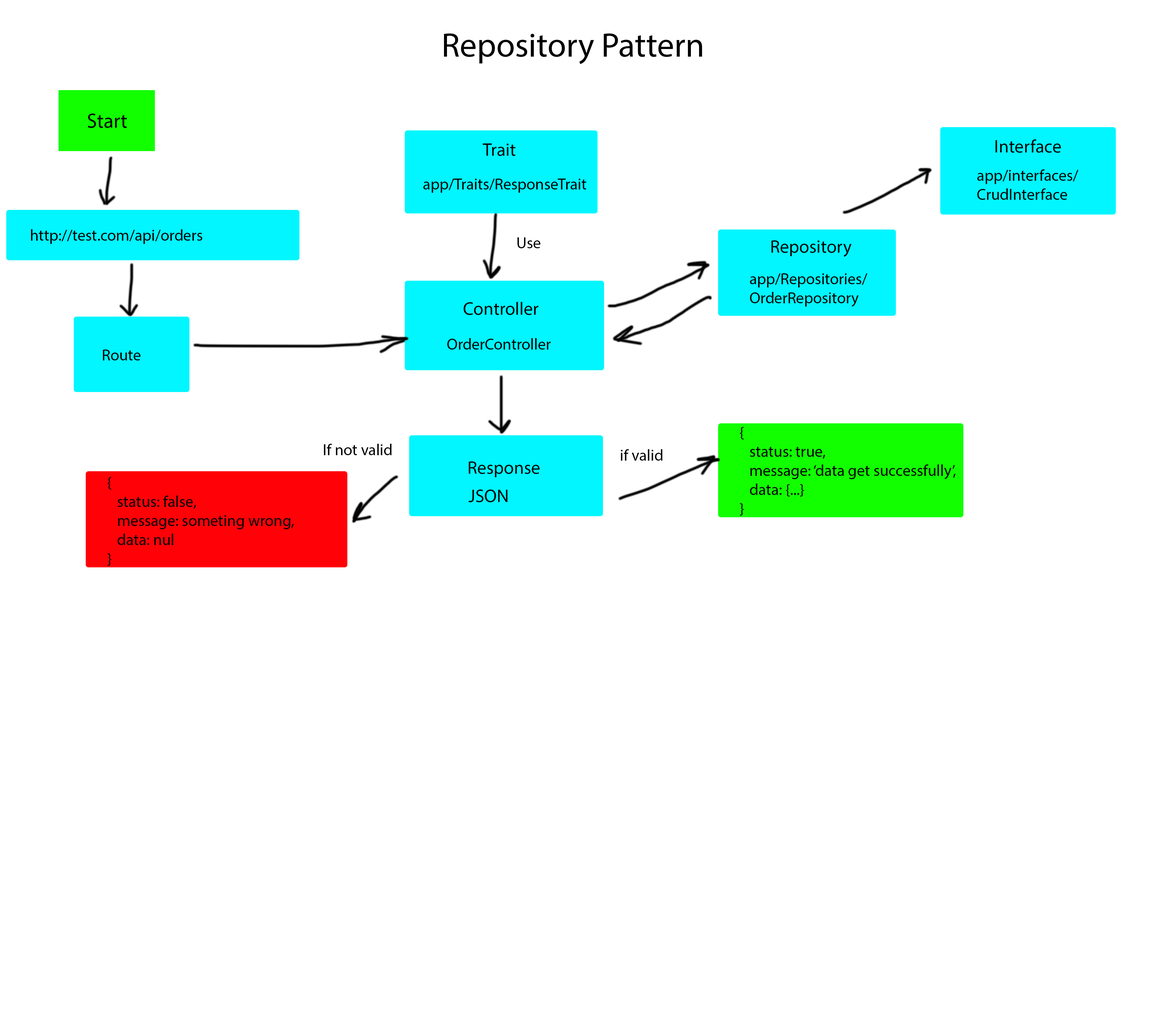
<style>
.page{position:relative;width:1170px;height:1019px;background:#ffffff}
.page>*{position:absolute;margin:0}
.t1{font:34px "MyriadPro-Regular";color:#000000}
.t2{font:20.4px "MyriadPro-Regular";color:#000000}
.t3{font:18.2px "MyriadPro-Regular";color:#000000}
.t4{font:15.9px "MyriadPro-Regular";color:#000000}
</style>
<div class="page">
<p class="t1" style="left:444px;top:33px;width:258px;height:31px">Repository Pattern</p>
<p class="t2" style="left:88px;top:114px;width:39px;height:14px">Start</p>
<p class="t3" style="left:483px;top:143px;width:33px;height:13px">Trait</p>
<p class="t3" style="left:996px;top:139px;width:65px;height:14px">Interface</p>
<p class="t4" style="left:977px;top:169px;width:102px;height:31px">app/interfaces/<br>CrudInterface</p>
<p class="t4" style="left:423px;top:179px;width:163px;height:14px">app/Traits/ResponseTrait</p>
<p class="t4" style="left:31px;top:229px;width:171px;height:15px">http://test.com/api/orders</p>
<p class="t4" style="left:518px;top:237px;width:22px;height:11px">Use</p>
<p class="t3" style="left:772px;top:240px;width:80px;height:17px">Repository</p>
<p class="t4" style="left:750px;top:273px;width:118px;height:34px">app/Repositories/<br>OrderRepository</p>
<p class="t3" style="left:464px;top:302px;width:75px;height:13px">Controller</p>
<p class="t4" style="left:447px;top:338px;width:104px;height:12px">OrderController</p>
<p class="t4" style="left:103px;top:350px;width:37px;height:10px">Route</p>
<p class="t4" style="left:740px;top:427px;width:216px;height:89px">{<br> status: true,<br> message: ‘data get successfully’,<br> data: {...}<br>}</p>
<p class="t4" style="left:324px;top:444px;width:68px;height:11px">If not valid</p>
<p class="t4" style="left:621px;top:449px;width:42px;height:12px">if valid</p>
<p class="t3" style="left:469px;top:461px;width:71px;height:16px">Response</p>
<p class="t4" style="left:108px;top:477px;width:186px;height:89px">{<br> status: false,<br> message: someting wrong,<br> data: nul<br>}</p>
<p class="t3" style="left:469px;top:490px;width:38px;height:12px">JSON</p>
</div>
